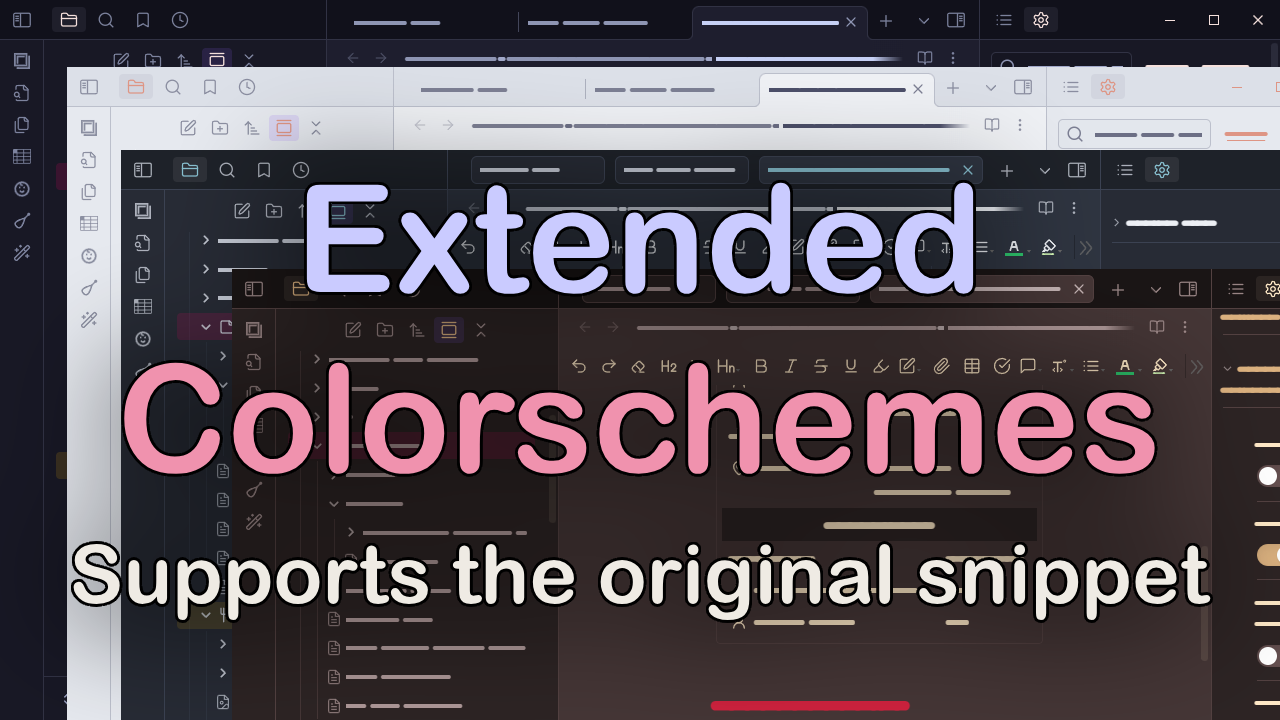
<style>
.page{position:relative;width:1280px;height:720px}
.page>*{position:absolute;margin:0}
.t1{font:81px "ArialRoundedMTBold";color:#efebe4}
.t2{font:150px "ArialRoundedMTBold";color:#cacbff}
.t3{font:150px "ArialRoundedMTBold";color:#f092ae}
</style>
<div class="page">
<p class="t1" style="left:73px;top:182px;width:1138px;height:439px;text-align:center"><span class="t2">Extended<br></span><span class="t3">Colorschemes<br> <br></span>Supports the original snippet</p>
</div>
